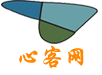
<style>
.page{position:relative;width:102px;height:75px;background:#ffffff}
.page>*{position:absolute;margin:0}
.t1{font:24px "STXingkai";color:#ff8600}
</style>
<div class="page">
<p class="t1" style="left:19px;top:45px;width:65px;height:24px">心客网</p>
</div>
